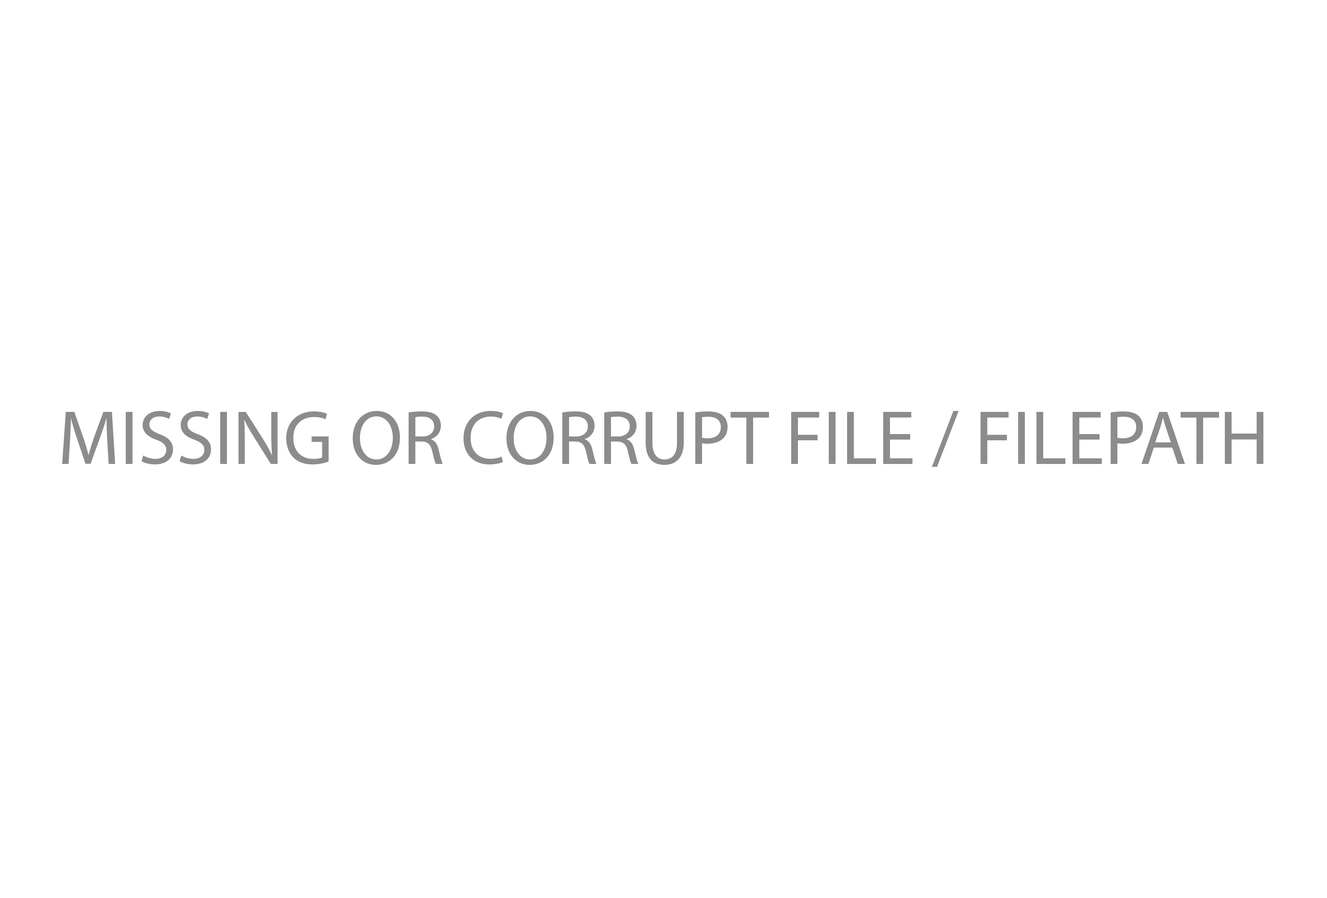
<style>
.page{position:relative;width:1327px;height:898px;background:#ffffff}
.page>*{position:absolute;margin:0}
.t1{font:77.1px "MyriadPro-Regular";color:#8c8c8c}
</style>
<div class="page">
<p class="t1" style="left:62px;top:411px;width:1202px;height:57px">MISSING OR CORRUPT FILE / FILEPATH</p>
</div>
